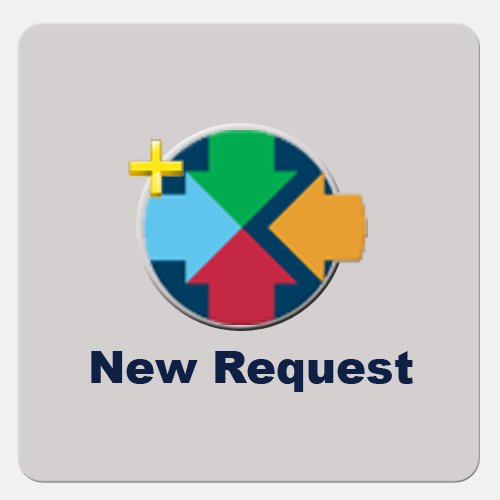
<style>
.page{position:relative;width:500px;height:500px;background:#d4d0d0}
.page>*{position:absolute;margin:0}
.t1{font:45px "Arial-Black";color:#0e2144}
</style>
<div class="page">
<p class="t1" style="left:91px;top:351px;width:322px;height:41px">New Request</p>
</div>
